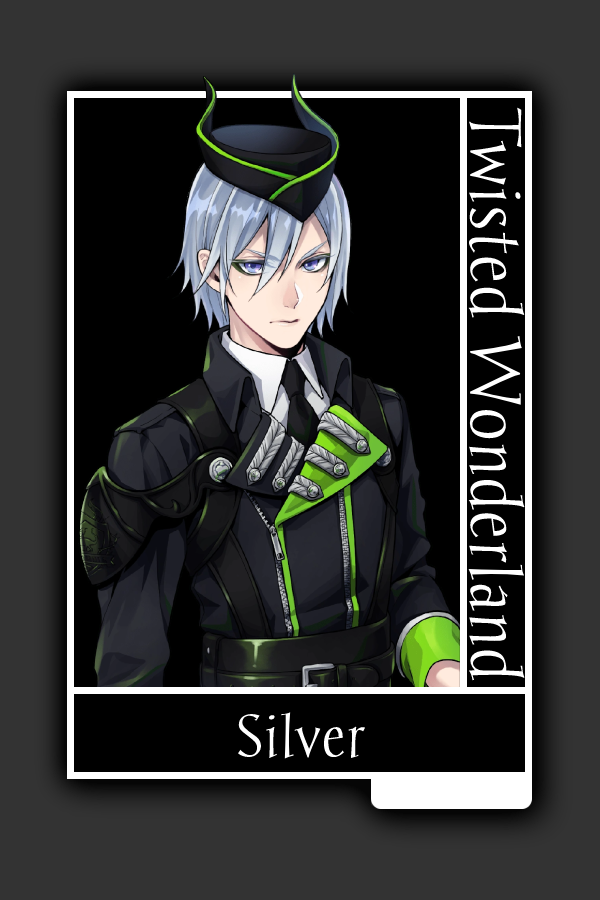
<style>
.page{position:relative;width:600px;height:900px;background:#000000}
.page>*{position:absolute;margin:0}
.t1{font:60px "Chantelli-Antiqua";color:#ffffff}
.t2{font:50px "Chantelli-Antiqua";color:#ffffff}
</style>
<div class="page">
<p class="t1" style="left:468px;top:107px;width:57px;height:574px;rotate:90deg">Twisted Wonderland</p>
<p class="t2" style="left:237px;top:712px;width:129px;height:47px">Silver</p>
</div>
